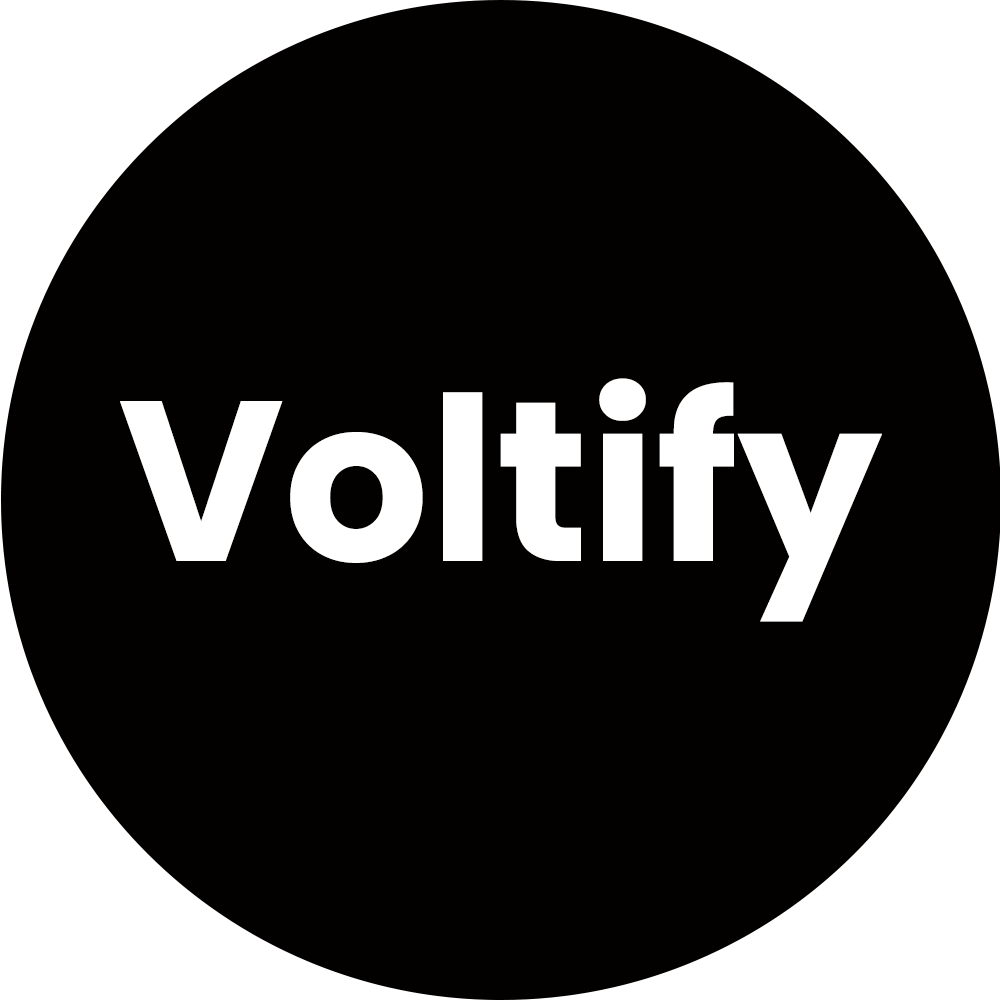
<style>
.page{position:relative;width:1000px;height:1000px;background:#030000}
.page>*{position:absolute;margin:0}
.t1{font:227.7px "Poppins-Bold";color:#ffffff}
</style>
<div class="page">
<p class="t1" style="left:120px;top:378px;width:762px;height:244px">Voltify</p>
</div>
